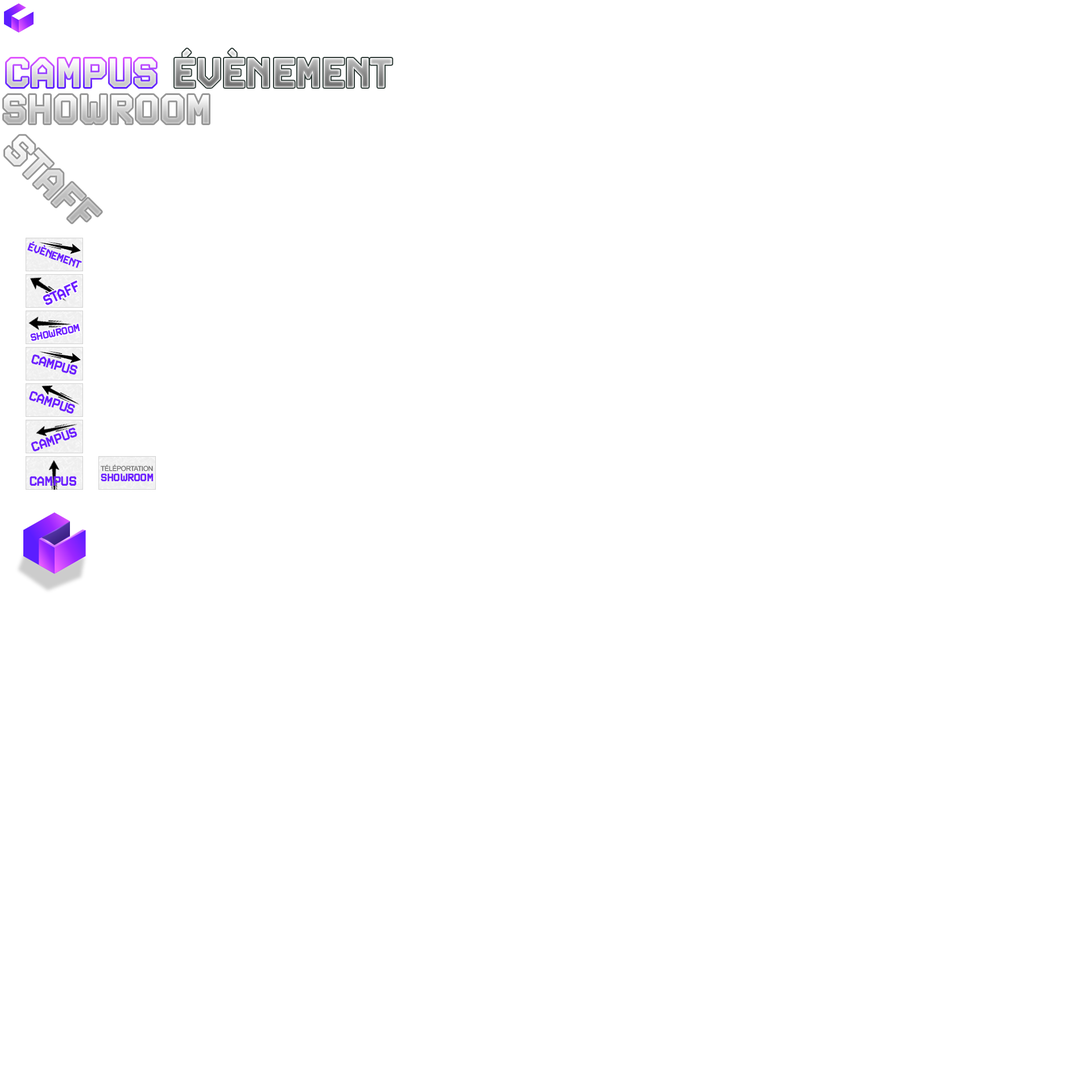
<style>
.page{position:relative;width:1092px;height:1092px;background:#ffffff}
.page>*{position:absolute;margin:0}
.t1{font:40.6px "Video-Bold"}
.t2{font:10.9px "Video-Bold";letter-spacing:-0.04em;color:#6d1fff;text-transform:uppercase}
.t3{font:14.5px "Video-Bold";letter-spacing:-0.04em;color:#6d1fff;text-transform:uppercase}
.t4{font:10.3px "Video-Bold";letter-spacing:-0.04em;color:#6d1fff;text-transform:uppercase}
.t5{font:13.5px "Video-Bold";letter-spacing:-0.04em;color:#6d1fff;text-transform:uppercase}
.t6{font:10.8px "Video-Bold";letter-spacing:-0.04em;color:#6d1fff;text-transform:uppercase}
.t7{font:6.8px "ArialMT";letter-spacing:-0.04em;color:#656565;text-transform:uppercase}
</style>
<div class="page">
<p class="t1" style="left:7px;top:59px;width:149px;height:28px">CAMPUS</p>
<p class="t2" style="left:27px;top:241px;width:55px;height:27px;rotate:20deg">évènement</p>
<p class="t3" style="left:43px;top:280px;width:35px;height:25px;rotate:-25deg">STAFF</p>
<p class="t4" style="left:30px;top:324px;width:50px;height:17px;rotate:-12deg">Showroom</p>
<p class="t5" style="left:31px;top:354px;width:47px;height:21px;rotate:16deg">CAMPUS</p>
<p class="t5" style="left:29px;top:391px;width:46px;height:23px;rotate:19deg">CAMPUS</p>
<p class="t5" style="left:31px;top:427px;width:46px;height:25px;rotate:-20deg">CAMPUS</p>
<p class="t6" style="left:101px;top:473px;width:53px;height:9px">SHOWROOM</p>
<p class="t7" style="left:101px;top:465px;width:52px;height:6px">Téléportation</p>
<p class="t5" style="left:30px;top:476px;width:46px;height:10px">CAMPUS</p>
</div>
